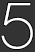
<style>
.page{position:relative;width:35px;height:52px;background:#333333}
.page>*{position:absolute;margin:0}
.t1{font:55px "Steiner";color:#ffffff}
</style>
<div class="page">
<p class="t1" style="left:1px;top:3px;width:32px;height:46px">5</p>
</div>
